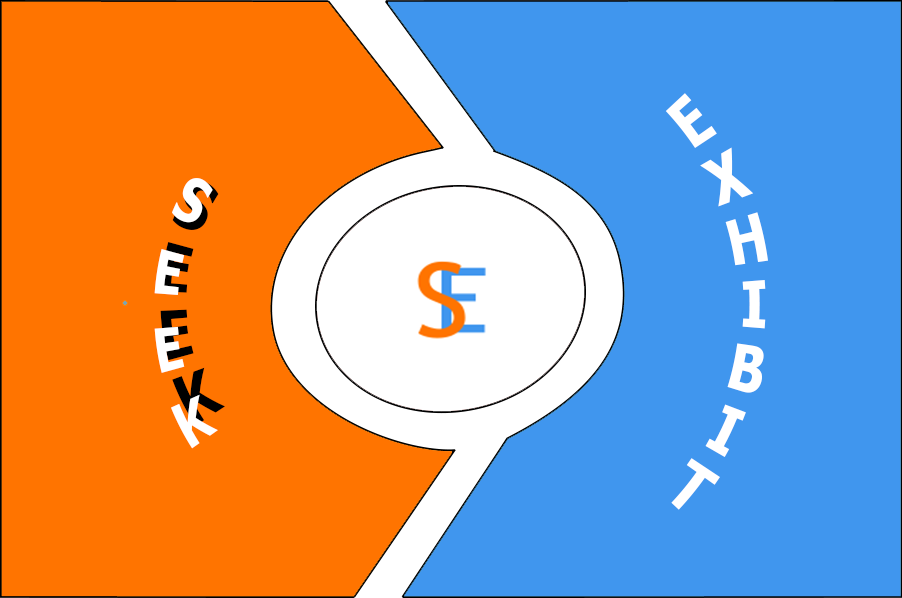
<style>
.page{position:relative;width:902px;height:598px;background:#4096ee}
.page>*{position:absolute;margin:0}
.t1{font:54.2px "Tahoma-Bold";color:#ffffff}
.t2{font:50px "Tahoma-Bold";color:#ffffff;scale:0.95 1}
.t3{font:54.2px "Tahoma-Bold";color:#000000}
</style>
<div class="page">
<p class="t1" style="left:665px;top:93px;width:103px;height:417px;text-align:center">EXHIBIT</p>
<p class="t2" style="left:154px;top:178px;width:64px;height:271px;text-align:center">S E E K</p>
<p class="t3" style="left:160px;top:181px;width:65px;height:245px;text-align:center">SEEK</p>
</div>
